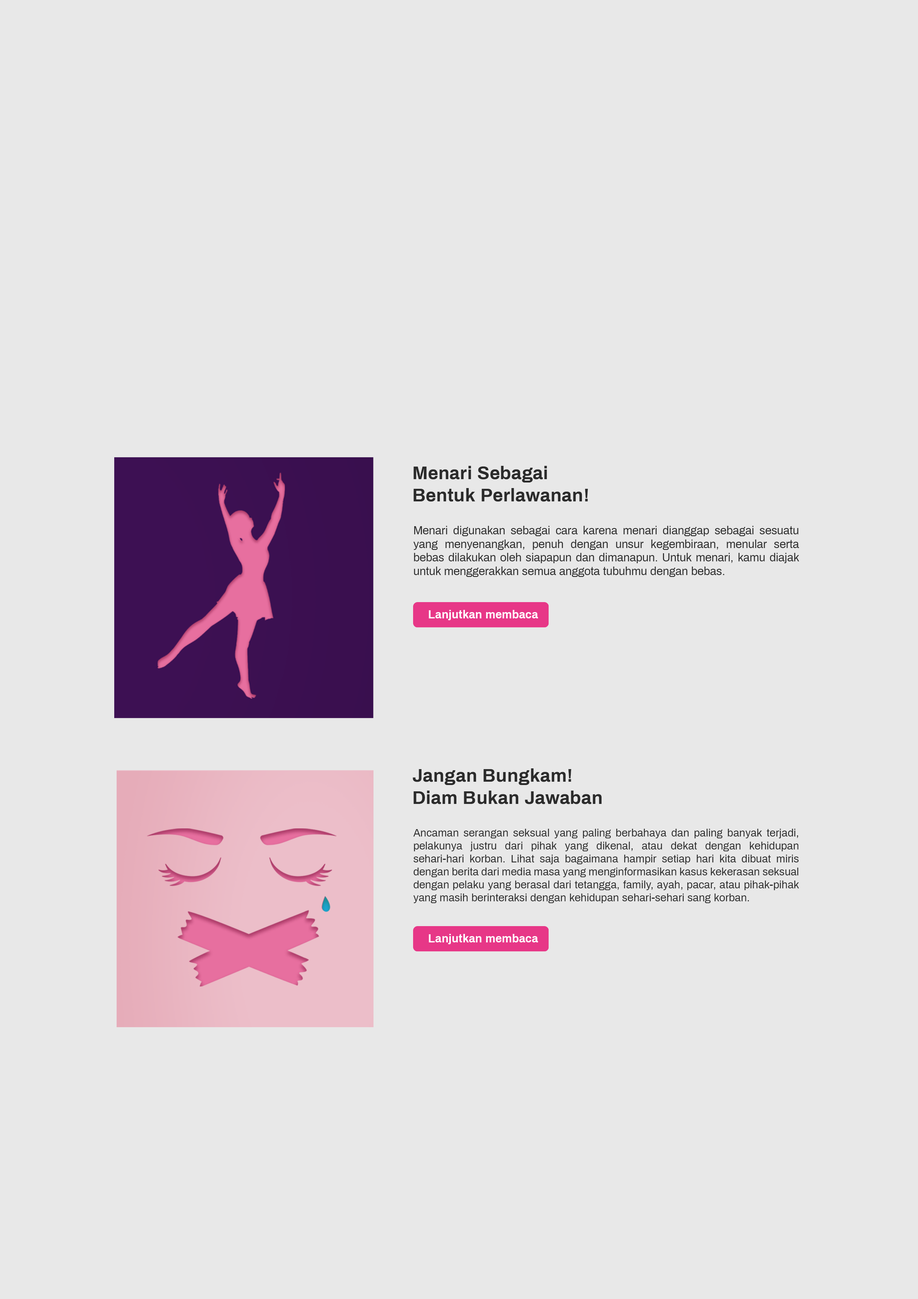
<style>
.page{position:relative;width:918px;height:1299px;background:#e8e8e8}
.page>*{position:absolute;margin:0}
.t1{font:18.5px "Archivo-Bold";color:#2b2b2b}
.t2{font:11.3px "Archivo-Regular";color:#2b2b2b}
.t3{font:10.8px "Archivo-Regular";color:#2b2b2b}
</style>
<div class="page">
<p class="t1" style="left:414px;top:466px;width:174px;height:36px">Menari Sebagai<br>Bentuk Perlawanan!</p>
<p class="t2" style="left:413px;top:526px;width:386px;height:51px;text-align:justify">Menari digunakan sebagai cara karena menari dianggap sebagai sesuatu yang menyenangkan, penuh dengan unsur kegembiraan, menular serta bebas dilakukan oleh siapapun dan dimanapun. Untuk menari, kamu diajak untuk menggerakkan semua anggota tubuhmu dengan bebas.</p>
<p class="t1" style="left:413px;top:768px;width:189px;height:36px">Jangan Bungkam!<br>Diam Bukan Jawaban</p>
<p class="t3" style="left:413px;top:829px;width:386px;height:74px;text-align:justify">Ancaman serangan seksual yang paling berbahaya dan paling banyak terjadi, pelakunya justru dari pihak yang dikenal, atau dekat dengan kehidupan sehari-hari korban. Lihat saja bagaimana hampir setiap hari kita dibuat miris dengan berita dari media masa yang menginformasikan kasus kekerasan seksual dengan pelaku yang berasal dari tetangga, family, ayah, pacar, atau pihak-pihak yang masih berinteraksi dengan kehidupan sehari-sehari sang korban.</p>
</div>
